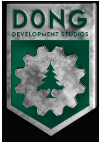
<style>
.page{position:relative;width:100px;height:142px}
.page>*{position:absolute;margin:0}
.t1{font:23.7px "LemonMilk";letter-spacing:0.1em;color:#004230}
.t2{font:5.7px "LemonMilk";letter-spacing:0.1em;color:#004230}
</style>
<div class="page">
<p class="t1" style="left:13px;top:9px;width:75px;height:20px">D0NG</p>
<p class="t2" style="left:12px;top:32px;width:77px;height:5px">development studios</p>
</div>
